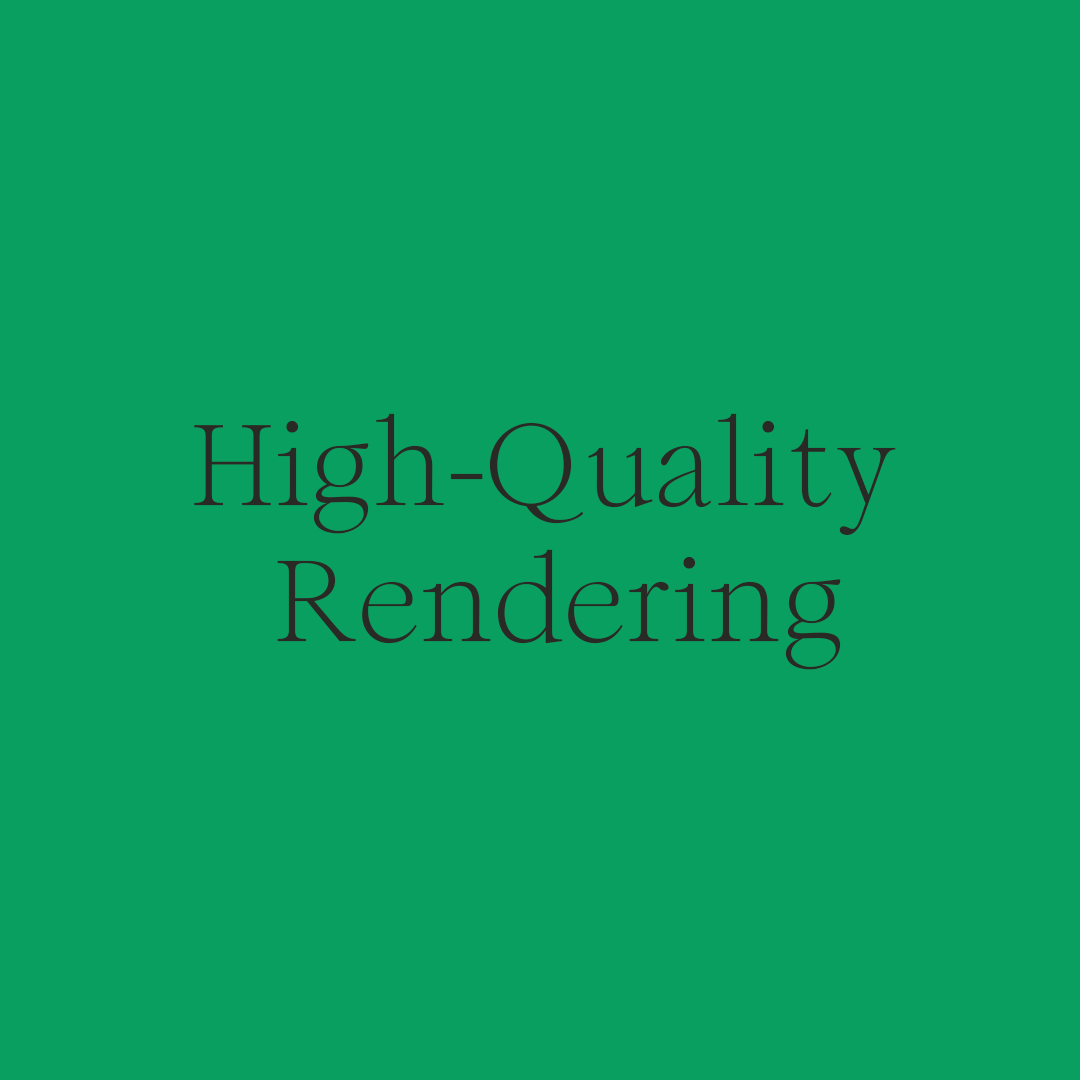
<style>
.page{position:relative;width:1080px;height:1080px;background:#089f60}
.page>*{position:absolute;margin:0}
.t1{font:113.9px "Romie-Regular";color:#292925;font-weight:bold}
</style>
<div class="page">
<p class="t1" style="left:194px;top:413px;width:702px;height:257px;text-align:center">High-Quality <br>Rendering</p>
</div>
